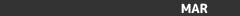
<style>
.page{position:relative;width:240px;height:16px;background:#333333}
.page>*{position:absolute;margin:0}
.t1{font:12.5px "RoundedMplus1c-ExtraBold";color:#ffffff}
</style>
<div class="page">
<p class="t1" style="left:181px;top:3px;width:27px;height:11px">MAR</p>
</div>
